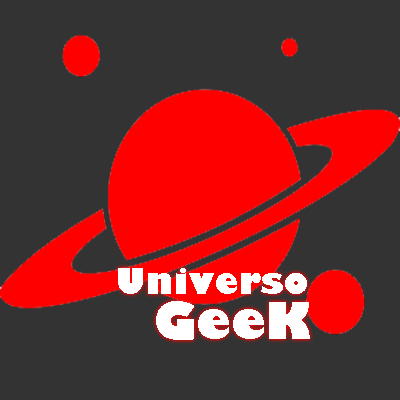
<style>
.page{position:relative;width:400px;height:400px;background:#333333}
.page>*{position:absolute;margin:0}
.t1{font:35px "GillSans-UltraBold";color:#ffffff}
.t2{font:50px "GillSans-UltraBold";color:#ffffff}
</style>
<div class="page">
<p class="t1" style="left:118px;top:268px;width:189px;height:26px">Universo</p>
<p class="t2" style="left:156px;top:301px;width:154px;height:39px">GeeK</p>
</div>
